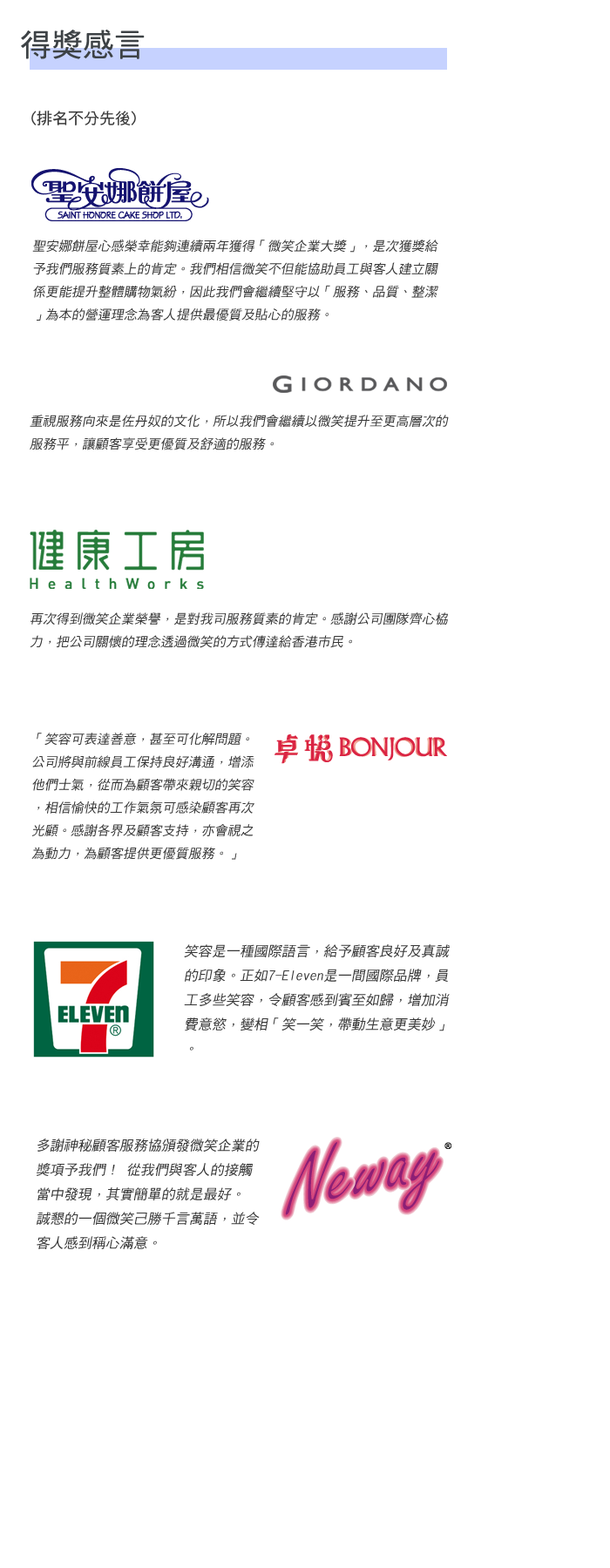
<style>
.page{position:relative;width:610px;height:1568px;background:#ffffff}
.page>*{position:absolute;margin:0}
.t1{font:31.4px "DFHei-Md-HKSCS-U";color:#3d4245}
.t2{font:15.7px "DFHei-Md-HKSCS-U";color:#363636}
.t3{font:13.1px "DFHei-Md-HKSCS-U";color:#363636;font-style:italic}
.t4{font:13.9px "DFHei-Md-HKSCS-U";color:#363636;font-style:italic}
</style>
<div class="page">
<p class="t1" style="left:21px;top:30px;width:124px;height:29px">得獎感言</p>
<p class="t2" style="left:31px;top:111px;width:105px;height:14px">(排名不分先後)</p>
<p class="t3" style="left:32px;top:240px;width:406px;height:81px">聖安娜餅屋心感榮幸能夠連續兩年獲得「微笑企業大獎」，是次獲獎給予我們服務質素上的肯定。我們相信微笑不但能協助員工與客人建立關係更能提升整體購物氣紛，因此我們會繼續堅守以「服務、品質、整潔」為本的營運理念為客人提供最優質及貼心的服務。</p>
<p class="t3" style="left:30px;top:415px;width:419px;height:35px">重視服務向來是佐丹奴的文化，所以我們會繼續以微笑提升至更高層次的服務平，讓顧客享受更優質及舒適的服務。</p>
<p class="t3" style="left:30px;top:612px;width:418px;height:36px">再次得到微笑企業榮譽，是對我司服務質素的肯定。感謝公司團隊齊心栛力，把公司關懷的理念透過微笑的方式傳達給香港市民。</p>
<p class="t3" style="left:31px;top:733px;width:223px;height:127px">「笑容可表達善意，甚至可化解問題。公司將與前線員工保持良好溝通，增添他們士氣，從而為顧客帶來親切的笑容，相信愉快的工作氣氛可感染顧客再次光顧。感謝各界及顧客支持，亦會視之為動力，為顧客提供更優質服務。」</p>
<p class="t4" style="left:184px;top:944px;width:265px;height:107px">笑容是一種國際語言，給予顧客良好及真誠的印象。正如7-Eleven是一間國際品牌，員工多些笑容，令顧客感到賓至如歸，增加消費意慾，變相「笑一笑，帶動生意更美妙」。</p>
<p class="t4" style="left:37px;top:1139px;width:223px;height:110px">多謝神秘顧客服務協頒發微笑企業的獎項予我們！ 從我們與客人的接觸當中發現，其實簡單的就是最好。 誠懇的一個微笑己勝千言萬語，並令客人感到稱心滿意。</p>
</div>
